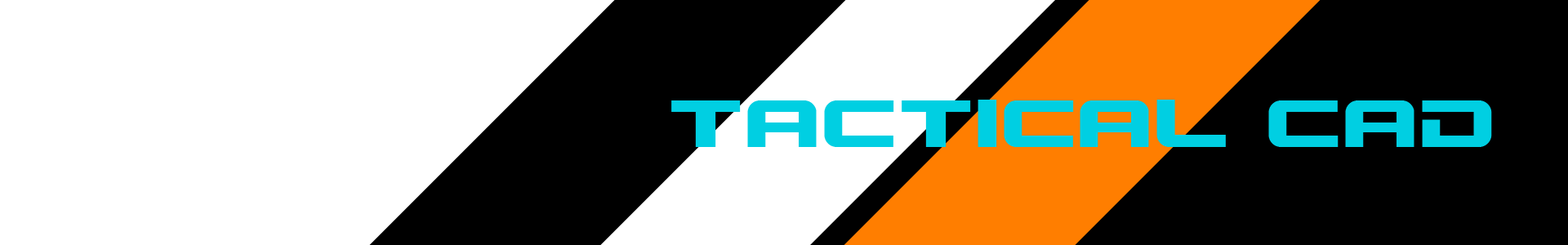
<style>
.page{position:relative;width:1568px;height:245px;background:#ffffff}
.page>*{position:absolute;margin:0}
.t1{font:73.5px "Gunship";color:#00cfe2}
</style>
<div class="page">
<p class="t1" style="left:671px;top:100px;width:821px;height:47px">Tactical CAD</p>
</div>
